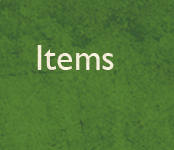
<style>
.page{position:relative;width:174px;height:150px}
.page>*{position:absolute;margin:0}
.t1{font:36px "GillSans";color:#f4edda}
</style>
<div class="page">
<p class="t1" style="left:37px;top:45px;width:77px;height:25px">Items</p>
</div>
